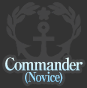
<style>
.page{position:relative;width:87px;height:88px;background:#333333}
.page>*{position:absolute;margin:0}
.t1{font:17px/15px "RyuminPro-ExBold";letter-spacing:-0.08em;color:#c9f2ff;scale:0.9 1}
.t2{font:13px/15px "RyuminPro-ExBold";letter-spacing:-0.08em;color:#c9f2ff;scale:0.9 1}
</style>
<div class="page">
<p class="t1" style="left:5px;top:57px;width:78px;height:27px;text-align:center">Commander<br><span class="t2">(Novice)</span></p>
</div>
